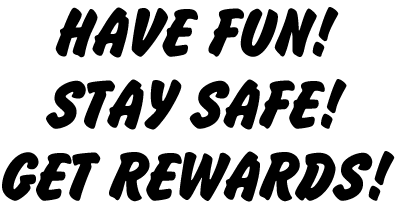
<style>
.page{position:relative;width:400px;height:210px;background:#ffffff}
.page>*{position:absolute;margin:0}
.t1{font:72px/72px "BrushHandNew";color:#000000}
.t2{font:72px/16px "BrushHandNew";color:#000000}
</style>
<div class="page">
<p class="t1" style="left:2px;top:7px;width:393px;height:195px;text-align:center"><span class="t2">HAVE FUN!<br></span>STAY SAFE!<br>GET REWARDS!</p>
</div>
